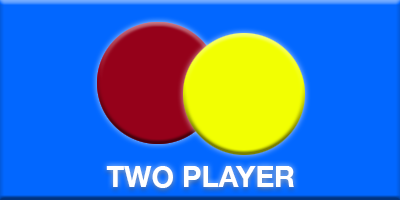
<style>
.page{position:relative;width:400px;height:200px;background:#0267ff}
.page>*{position:absolute;margin:0}
.t1{font:28.9px "HelveticaNeue-Bold";color:#ffffff}
</style>
<div class="page">
<p class="t1" style="left:106px;top:166px;width:188px;height:22px">TWO PLAYER</p>
</div>
